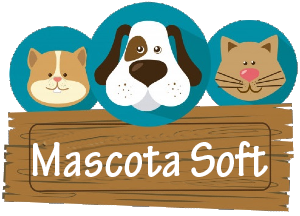
<style>
.page{position:relative;width:300px;height:216px;background:#ffffff}
.page>*{position:absolute;margin:0}
.t1{font:52px "TektonPro-BoldCond";color:#ffffff}
</style>
<div class="page">
<p class="t1" style="left:32px;top:141px;width:236px;height:36px">Mascota Soft</p>
</div>
